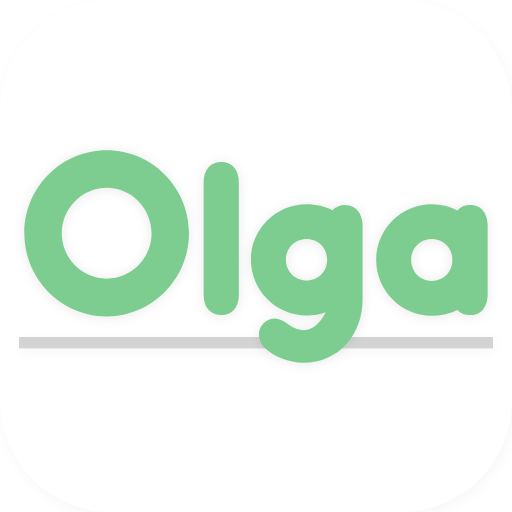
<style>
.page{position:relative;width:512px;height:512px;background:#ffffff}
.page>*{position:absolute;margin:0}
.t1{font:216px "HirukoPro-Black";color:#7ccd8f}
</style>
<div class="page">
<p class="t1" style="left:24px;top:150px;width:464px;height:213px">Olga</p>
</div>
